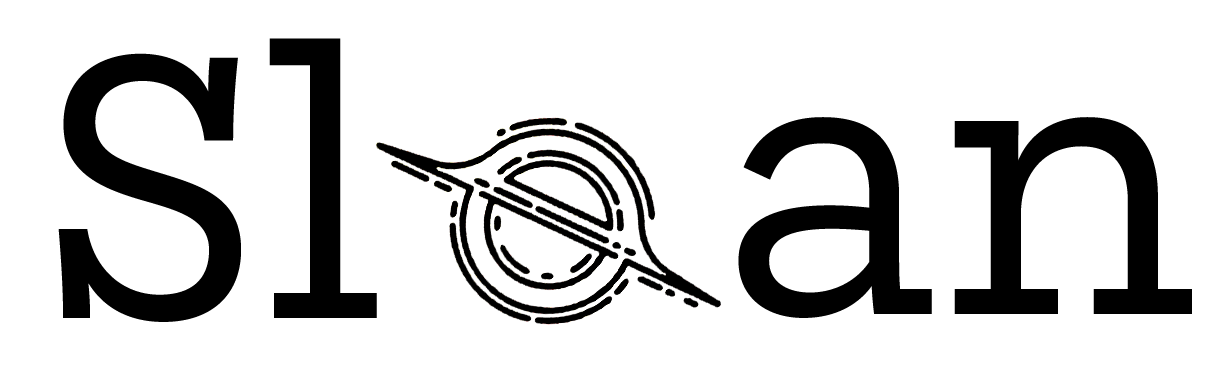
<style>
.page{position:relative;width:1227px;height:385px;background:#ffffff}
.page>*{position:absolute;margin:0}
.t1{font:400px "Mortise-Regular";color:#000000}
</style>
<div class="page">
<p class="t1" style="left:58px;top:38px;width:319px;height:284px">Sl</p>
<p class="t1" style="left:738px;top:117px;width:454px;height:201px">an</p>
</div>
